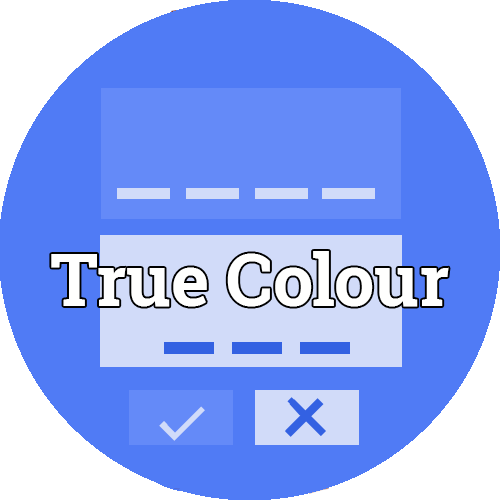
<style>
.page{position:relative;width:500px;height:500px;background:#507bf5}
.page>*{position:absolute;margin:0}
.t1{font:71.5px "RobotoSlab-Bold";color:#fffffe}
</style>
<div class="page">
<p class="t1" style="left:51px;top:251px;width:398px;height:56px">True Colour</p>
</div>
